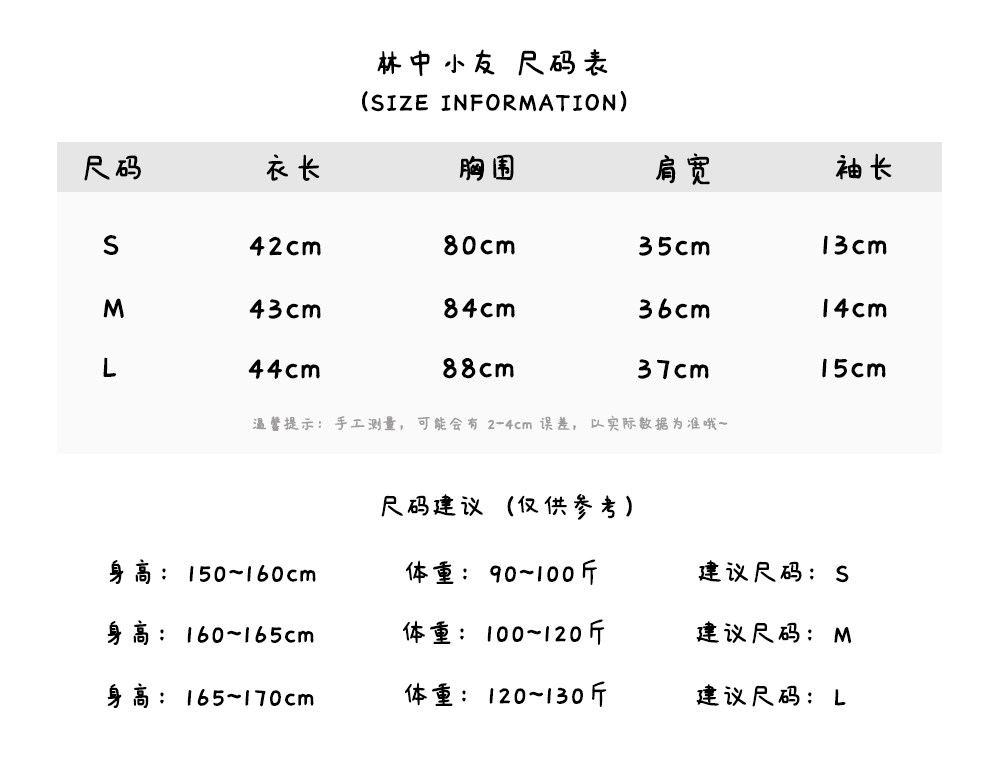
<style>
.page{position:relative;width:1000px;height:782px;background:#ffffff}
.page>*{position:absolute;margin:0}
.t1{font:36px "IdeaFonts-QianXiaTi";color:#000000;font-weight:bold}
.t2{font:30px "IdeaFonts-QianXiaTi";color:#000000;font-weight:bold}
.t3{font:18px "IdeaFonts-QianXiaTi";color:#9f9d9d;font-weight:bold}
</style>
<div class="page">
<p class="t1" style="left:377px;top:49px;width:231px;height:28px">林中小友 尺码表</p>
<p class="t2" style="left:362px;top:90px;width:265px;height:22px">（SIZE INFORMATION）</p>
<p class="t1" style="left:84px;top:155px;width:57px;height:26px">尺码</p>
<p class="t1" style="left:266px;top:154px;width:54px;height:27px">衣长</p>
<p class="t1" style="left:459px;top:154px;width:55px;height:27px">胸围</p>
<p class="t1" style="left:656px;top:153px;width:54px;height:32px">肩宽</p>
<p class="t1" style="left:835px;top:153px;width:57px;height:27px">袖长</p>
<p class="t1" style="left:103px;top:235px;width:16px;height:20px">S</p>
<p class="t1" style="left:249px;top:236px;width:72px;height:20px">42cm</p>
<p class="t1" style="left:444px;top:235px;width:71px;height:21px">80cm</p>
<p class="t1" style="left:639px;top:236px;width:71px;height:20px">35cm</p>
<p class="t1" style="left:823px;top:235px;width:64px;height:20px">13cm</p>
<p class="t1" style="left:103px;top:298px;width:21px;height:20px">M</p>
<p class="t1" style="left:249px;top:299px;width:72px;height:20px">43cm</p>
<p class="t1" style="left:444px;top:298px;width:71px;height:21px">84cm</p>
<p class="t1" style="left:639px;top:298px;width:71px;height:21px">36cm</p>
<p class="t1" style="left:823px;top:298px;width:64px;height:20px">14cm</p>
<p class="t1" style="left:103px;top:357px;width:14px;height:20px">L</p>
<p class="t1" style="left:248px;top:359px;width:72px;height:20px">44cm</p>
<p class="t1" style="left:443px;top:358px;width:71px;height:21px">88cm</p>
<p class="t1" style="left:638px;top:359px;width:71px;height:21px">37cm</p>
<p class="t1" style="left:822px;top:358px;width:64px;height:20px">15cm</p>
<p class="t3" style="left:252px;top:415px;width:476px;height:16px">温馨提示：手工测量，可能会有 2-4cm 误差，以实际数据为准哦~</p>
<p class="t2" style="left:381px;top:493px;width:251px;height:27px">尺码建议（仅供参考）</p>
<p class="t2" style="left:109px;top:559px;width:207px;height:25px">身高：150~160cm</p>
<p class="t2" style="left:406px;top:559px;width:191px;height:26px">体重：90~100斤</p>
<p class="t2" style="left:698px;top:560px;width:151px;height:23px">建议尺码：S</p>
<p class="t2" style="left:107px;top:620px;width:207px;height:25px">身高：160~165cm</p>
<p class="t2" style="left:403px;top:619px;width:202px;height:26px">体重：100~120斤</p>
<p class="t2" style="left:696px;top:621px;width:156px;height:23px">建议尺码：M</p>
<p class="t2" style="left:107px;top:683px;width:207px;height:25px">身高：165~170cm</p>
<p class="t2" style="left:405px;top:681px;width:202px;height:26px">体重：120~130斤</p>
<p class="t2" style="left:696px;top:684px;width:150px;height:23px">建议尺码：L</p>
</div>
